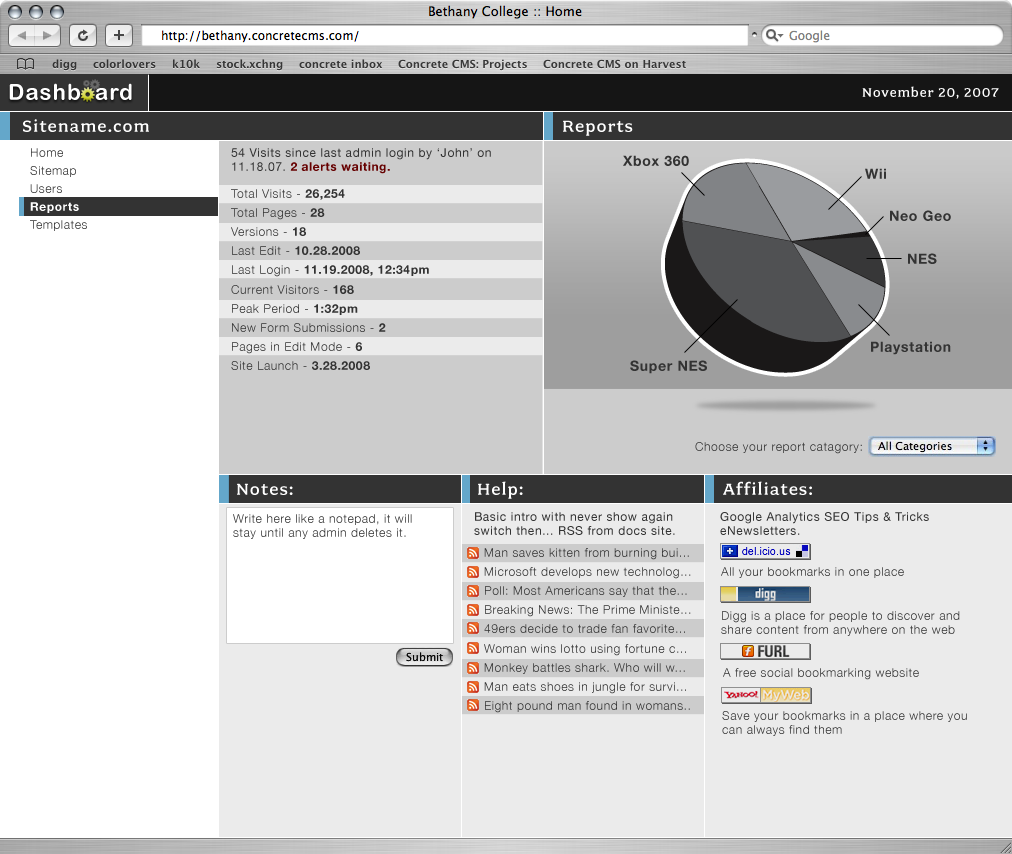
<style>
.page{position:relative;width:1012px;height:854px;background:#ebebeb}
.page>*{position:absolute;margin:0}
.t1{font:22px "ArialRoundedMTBold";letter-spacing:0.05em;color:#ffffff}
.t2{font:14px "FairplexWideMedium";letter-spacing:0.05em;color:#ffffff}
.t3{font:18px "FairplexWideMedium";letter-spacing:0.05em;color:#ffffff}
.t4{font:12px/14px "HelveticaNeue";letter-spacing:0.05em;color:#333333}
.t5{font:12px/14px "HelveticaNeue-Bold";letter-spacing:0.05em;color:#660000}
.t6{font:14px "HelveticaNeue-Bold";letter-spacing:0.05em;color:#333333}
.t7{font:12px "HelveticaNeue-Light";letter-spacing:0.05em;color:#333333}
.t8{font:12px "HelveticaNeue-Bold";letter-spacing:0.05em;color:#333333}
.t9{font:12px/14px "HelveticaNeue-Light";letter-spacing:0.05em;color:#333333}
</style>
<div class="page">
<p class="t1" style="left:9px;top:83px;width:123px;height:17px">Dashb  ard</p>
<p class="t2" style="left:862px;top:86px;width:137px;height:13px">November 20, 2007</p>
<p class="t3" style="left:23px;top:119px;width:126px;height:13px">Sitename.com</p>
<p class="t3" style="left:563px;top:120px;width:70px;height:16px">Reports</p>
<p class="t4" style="left:231px;top:148px;width:260px;height:26px">54 Visits since last admin login by ‘John’ on <br>11.18.07. <span class="t5">2 alerts waiting.</span></p>
<p class="t6" style="left:623px;top:155px;width:66px;height:11px">Xbox 360</p>
<p class="t6" style="left:865px;top:168px;width:21px;height:11px">Wii</p>
<p class="t7" style="left:231px;top:189px;width:114px;height:11px">Total Visits - <span class="t8">26,254</span></p>
<p class="t7" style="left:231px;top:208px;width:94px;height:12px">Total Pages - <span class="t8">28</span></p>
<p class="t6" style="left:890px;top:210px;width:61px;height:11px">Neo Geo</p>
<p class="t7" style="left:231px;top:227px;width:75px;height:9px">Versions - <span class="t8">18</span></p>
<p class="t7" style="left:232px;top:246px;width:128px;height:9px">Last Edit - <span class="t8">10.28.2008</span></p>
<p class="t6" style="left:908px;top:253px;width:29px;height:11px">NES</p>
<p class="t8" style="left:232px;top:265px;width:197px;height:12px"><span class="t7">Last Login - </span>11.19.2008, 12:34pm</p>
<p class="t7" style="left:231px;top:285px;width:123px;height:9px">Current Visitors - <span class="t8">168</span></p>
<p class="t7" style="left:232px;top:304px;width:126px;height:11px">Peak Period - <span class="t8">1:32pm</span></p>
<p class="t7" style="left:232px;top:323px;width:154px;height:9px">New Form Submissions - <span class="t8">2</span></p>
<p class="t7" style="left:232px;top:342px;width:130px;height:12px">Pages in Edit Mode - <span class="t8">6</span></p>
<p class="t6" style="left:871px;top:341px;width:80px;height:14px">Playstation</p>
<p class="t7" style="left:231px;top:361px;width:139px;height:9px">Site Launch - <span class="t8">3.28.2008</span></p>
<p class="t6" style="left:630px;top:360px;width:77px;height:14px">Super NES</p>
<p class="t7" style="left:695px;top:442px;width:167px;height:12px">Choose your report catagory:</p>
<p class="t3" style="left:237px;top:483px;width:56px;height:12px">Notes:</p>
<p class="t3" style="left:478px;top:481px;width:45px;height:18px">Help:</p>
<p class="t3" style="left:723px;top:481px;width:89px;height:14px">Affiliates:</p>
<p class="t9" style="left:233px;top:514px;width:179px;height:25px">Write here like a notepad, it will<br>stay until any admin deletes it.</p>
<p class="t4" style="left:474px;top:512px;width:201px;height:23px">Basic intro with never show again<br>switch then... RSS from docs site.</p>
<p class="t4" style="left:720px;top:512px;width:209px;height:23px">Google Analytics SEO Tips &amp; Tricks<br>eNewsletters.</p>
<p class="t7" style="left:484px;top:548px;width:205px;height:12px">Man saves kitten from burning bui...</p>
<p class="t7" style="left:484px;top:567px;width:207px;height:12px">Microsoft develops new technolog...</p>
<p class="t7" style="left:721px;top:567px;width:183px;height:11px">All your bookmarks in one place</p>
<p class="t7" style="left:485px;top:586px;width:202px;height:11px">Poll: Most Americans say that the...</p>
<p class="t7" style="left:485px;top:605px;width:206px;height:12px">Breaking News: The Prime Ministe...</p>
<p class="t9" style="left:721px;top:611px;width:239px;height:25px">Digg is a place for people to discover and <br>share content from anywhere on the web</p>
<p class="t7" style="left:484px;top:624px;width:201px;height:9px">49ers decide to trade fan favorite...</p>
<p class="t7" style="left:484px;top:644px;width:202px;height:12px">Woman wins lotto using fortune c...</p>
<p class="t7" style="left:484px;top:663px;width:201px;height:11px">Monkey battles shark. Who will w...</p>
<p class="t7" style="left:723px;top:668px;width:196px;height:12px">A free social bookmarking website</p>
<p class="t7" style="left:484px;top:682px;width:202px;height:12px">Man eats shoes in jungle for survi...</p>
<p class="t7" style="left:485px;top:701px;width:205px;height:12px">Eight pound man found in womans..</p>
<p class="t9" style="left:722px;top:711px;width:245px;height:25px">Save your bookmarks in a place where you <br>can always find them</p>
</div>
